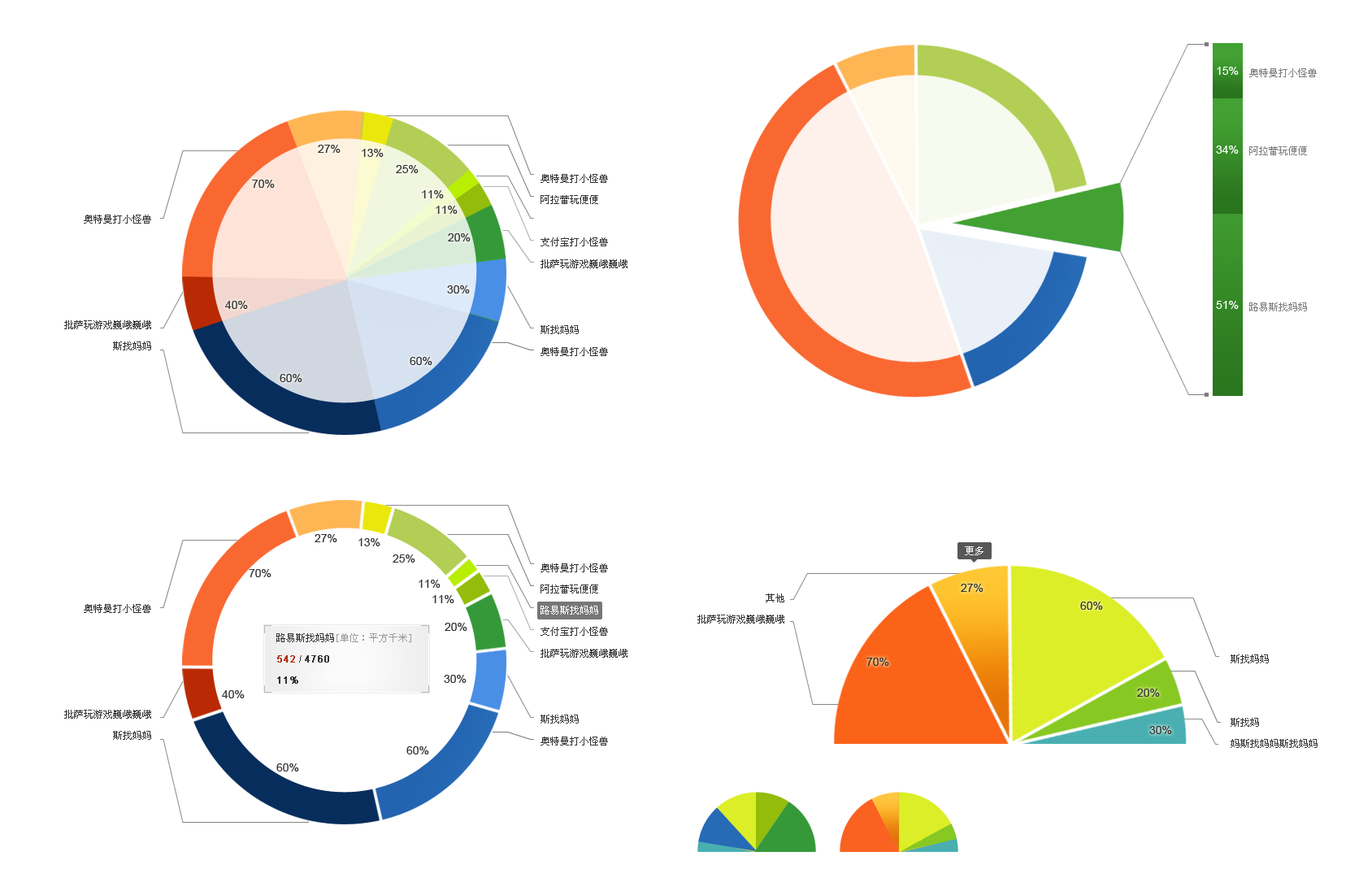
<style>
.page{position:relative;width:1359px;height:878px;background:#ffffff}
.page>*{position:absolute;margin:0}
.t1{font:11.4px "ArialMT";color:#ffffff}
.t2{font:9.8px/19.5px "SimSun";color:#7d7d7d}
.t3{font:9.8px/21.9px "SimSun";color:#333333}
.t4{font:9.8px/21.1px "SimSun";color:#333333}
.t5{font:9.8px/21.1px "SimSun";color:#ffffff}
.t6{font:9.8px "SimSun";color:#ffffff}
.t7{font:9.8px/21.1px "SimSun";color:#999999}
.t8{font:9.8px/21.1px "ArialMT";color:#b22f0c;font-weight:bold}
.t9{font:9.8px/21.1px "ArialMT";color:#333333}
.t10{font:9.8px/21.1px "ArialMT";color:#333333;font-weight:bold}
</style>
<div class="page">
<p class="t1" style="left:1216px;top:67px;width:22px;height:8px">15%</p>
<p class="t2" style="left:1249px;top:68px;width:67px;height:243px">奥特曼打小怪兽<br><br><br><br>阿拉蕾玩便便<br><br><br><br><br><br><br><br>路易斯找妈妈</p>
<p class="t1" style="left:1216px;top:145px;width:22px;height:9px">34%</p>
<p class="t3" style="left:540px;top:174px;width:87px;height:182px"><span class="t4">奥特曼打小怪兽<br>阿拉蕾玩便便<br></span><span class="t5">路易斯找妈妈<br></span><span class="t4">支付宝打小怪兽<br></span>批萨玩游戏巍峨巍峨<br><br><br>斯找妈妈<br>奥特曼打小怪兽</p>
<p class="t4" style="left:64px;top:215px;width:87px;height:135px;text-align:right">奥特曼打小怪兽<br> <br><br><br><br>批萨玩游戏巍峨巍峨<br>斯找妈妈</p>
<p class="t1" style="left:1216px;top:301px;width:22px;height:8px">51%</p>
<p class="t6" style="left:965px;top:546px;width:18px;height:9px">更多</p>
<p class="t3" style="left:540px;top:563px;width:87px;height:182px"><span class="t4">奥特曼打小怪兽<br>阿拉蕾玩便便<br></span><span class="t5">路易斯找妈妈<br></span><span class="t4">支付宝打小怪兽<br></span>批萨玩游戏巍峨巍峨<br><br><br>斯找妈妈<br>奥特曼打小怪兽</p>
<p class="t4" style="left:697px;top:593px;width:87px;height:30px;text-align:right">其他<br> 批萨玩游戏巍峨巍峨</p>
<p class="t4" style="left:64px;top:604px;width:87px;height:135px;text-align:right">奥特曼打小怪兽<br> <br><br><br><br>批萨玩游戏巍峨巍峨<br>斯找妈妈</p>
<p class="t7" style="left:276px;top:633px;width:135px;height:50px"><span class="t4">路易斯找妈妈</span>[单位：平方千米]<br><span class="t8">542 </span><span class="t9">/ </span><span class="t10">4760<br>11%</span></p>
<p class="t4" style="left:1230px;top:654px;width:87px;height:94px">斯找妈妈<br><br><br>斯找妈<br>妈斯找妈妈斯找妈妈</p>
</div>
